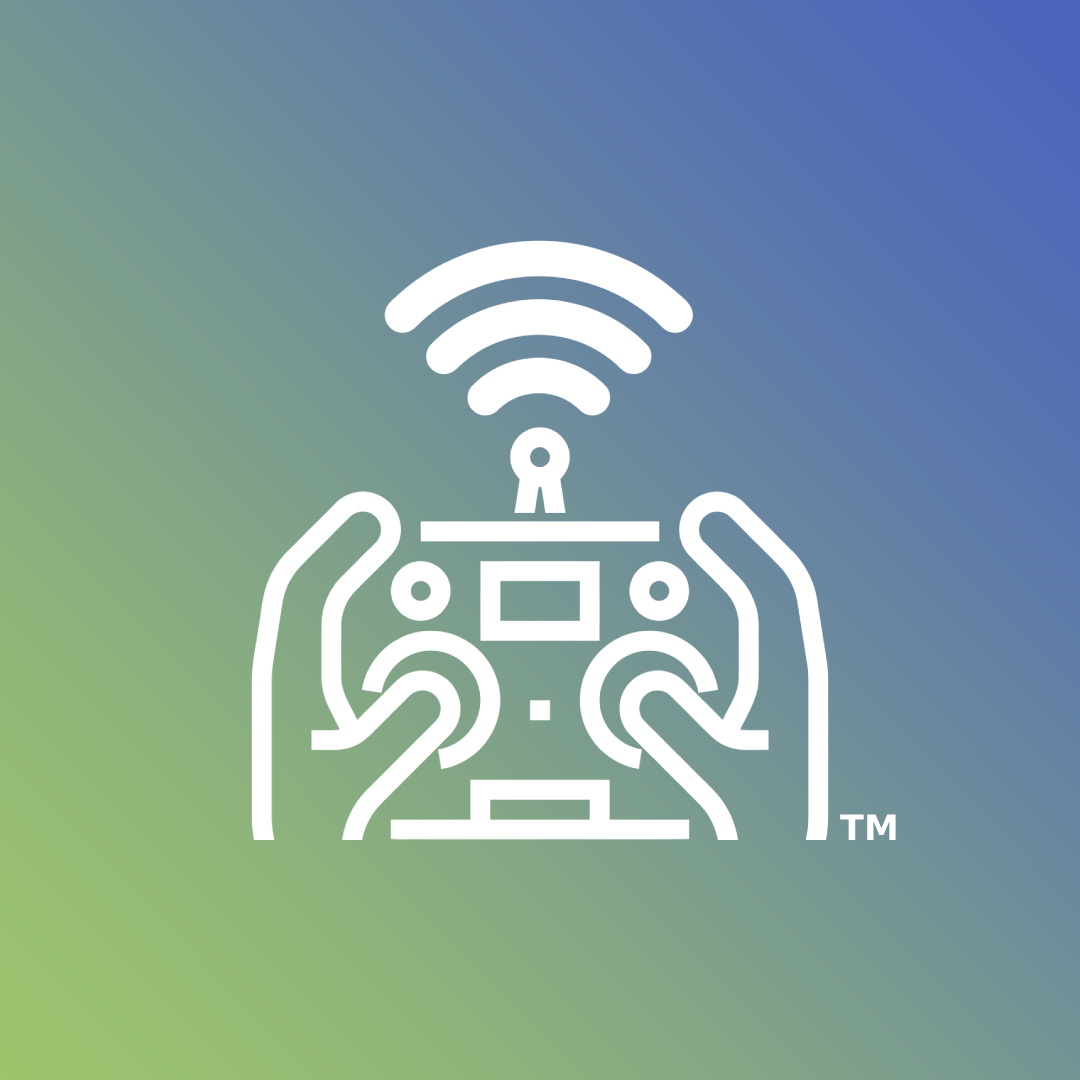
<style>
.page{position:relative;width:1080px;height:1080px}
.page>*{position:absolute;margin:0}
.t1{font:35px "DejaVuSans-Bold";color:#ffffff}
</style>
<div class="page">
<p class="t1" style="left:840px;top:814px;width:56px;height:26px">TM</p>
</div>
